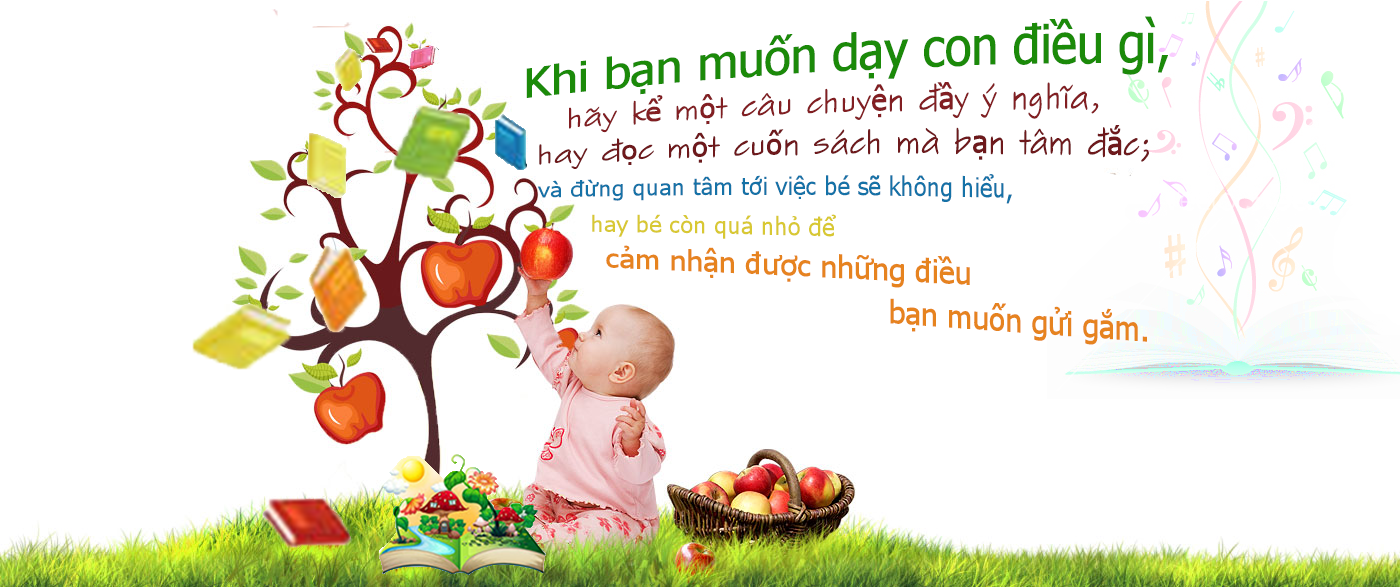
<style>
.page{position:relative;width:1400px;height:587px;background:#ffffff}
.page>*{position:absolute;margin:0}
.t1{font:30px/20px "Tahoma";color:#e6831f}
.t2{font:48px/20px "Tahoma";color:#1b8a09}
.t3{font:30px/20px "SketchFlowPrint";color:#821e22}
.t4{font:30px/20px "Tahoma";color:#821e22}
.t5{font:30px/20px "SketchFlowPrint";color:#6e191c}
.t6{font:30px/20px "Tahoma";color:#6e191c}
.t7{font:24px/20px "Tahoma";color:#1572a7}
.t8{font:24px/20px "Tahoma";color:#d8c833}
</style>
<div class="page">
<p class="t1" style="left:526px;top:16px;width:642px;height:329px"><span class="t2">Khi bạn muốn dạy con điều gì, <br><br>     </span><span class="t3">hãy k</span><span class="t4">ể</span><span class="t3"> m</span><span class="t4">ộ</span><span class="t3">t câu chuy</span><span class="t4">ệ</span><span class="t3">n đ</span><span class="t4">ầ</span><span class="t3">y ý nghĩa,<br><br> </span><span class="t5">hay đ</span><span class="t6">ọ</span><span class="t5">c m</span><span class="t6">ộ</span><span class="t5">t cu</span><span class="t6">ố</span><span class="t5">n sách mà b</span><span class="t6">ạ</span><span class="t5">n tâm đ</span><span class="t6">ắ</span><span class="t5">c; <br><br></span><span class="t7">  và đừng quan tâm tới việc bé sẽ không hiểu,<br> <br>         </span><span class="t8">hay bé còn quá nhỏ để <br><br>           </span>cảm nhận được những điều <br><br>                                       bạn muốn gửi gắm.</p>
</div>
